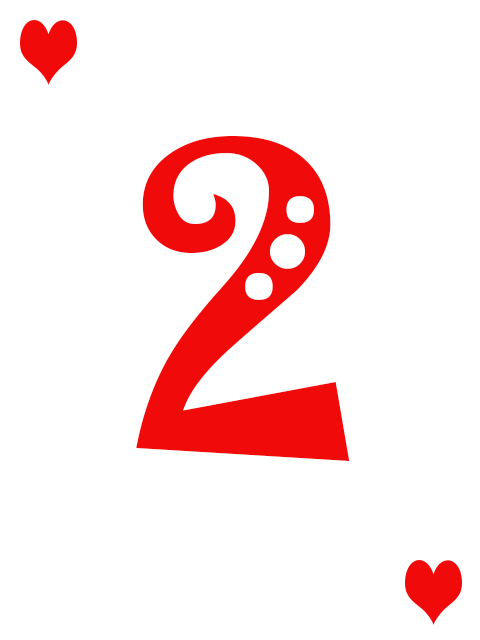
<style>
.page{position:relative;width:480px;height:640px;background:#ffffff}
.page>*{position:absolute;margin:0}
.t1{font:386.3px "Jokerman-Regular";color:#f10a0a}
</style>
<div class="page">
<p class="t1" style="left:136px;top:136px;width:214px;height:325px">2</p>
</div>
